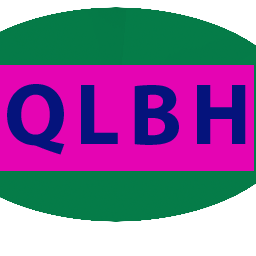
<style>
.page{position:relative;width:256px;height:256px;background:#e504b3}
.page>*{position:absolute;margin:0}
.t1{font:87.9px "MyriadPro-Bold";letter-spacing:0.1em;color:#05137c}
</style>
<div class="page">
<p class="t1" style="left:7px;top:84px;width:239px;height:71px">QLBH</p>
</div>
